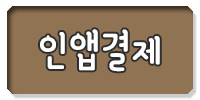
<style>
.page{position:relative;width:200px;height:100px;background:#907353}
.page>*{position:absolute;margin:0}
.t1{font:48.9px "YanoljaYacheR";color:#ffffff}
</style>
<div class="page">
<p class="t1" style="left:40px;top:29px;width:120px;height:43px">인앱결제</p>
</div>
